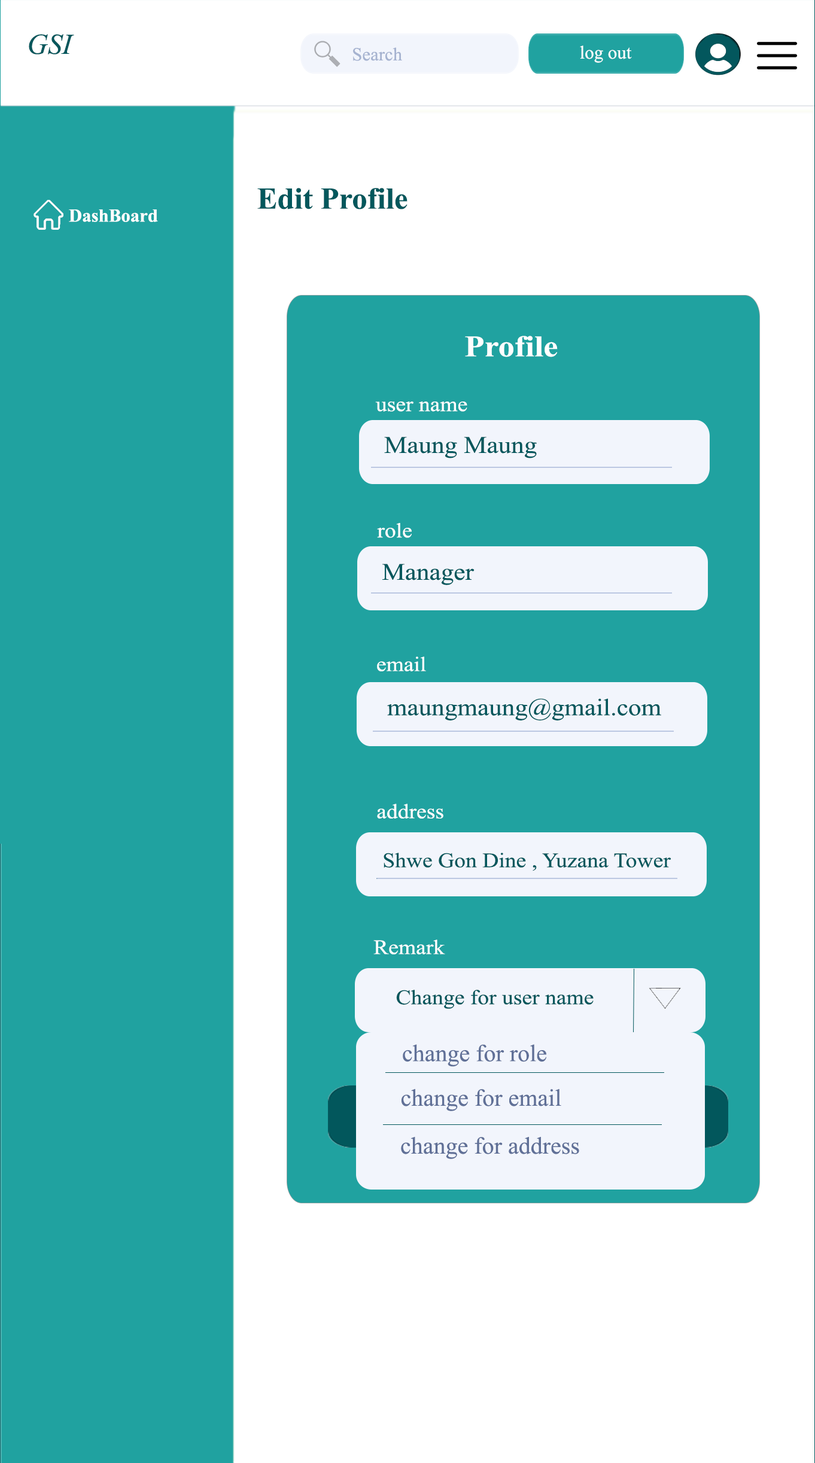
<style>
.page{position:relative;width:815px;height:1463px;background:#20a2a0}
.page>*{position:absolute;margin:0}
.t1{font:28.7px "TimesNewRomanPS-ItalicMT";color:#02575c}
.t2{font:18.5px "TimesNewRomanPSMT";color:#a6b3d0}
.t3{font:18.5px "TimesNewRomanPSMT";color:#ffffff}
.t4{font:30.4px "TimesNewRomanPS-BoldMT";color:#02575c}
.t5{font:18.5px "TimesNewRomanPS-BoldMT";color:#ffffff}
.t6{font:29.9px "TimesNewRomanPS-BoldMT";color:#ffffff;scale:1.09 1}
.t7{font:20.7px "TimesNewRomanPSMT";color:#ffffff;scale:1.09 1}
.t8{font:23.7px "TimesNewRomanPSMT";color:#02575c;scale:1.09 1}
.t9{font:20.7px "TimesNewRomanPSMT";color:#02575c;scale:1.09 1}
.t10{font:23.9px "TimesNewRomanPSMT";color:#607097}
</style>
<div class="page">
<p class="t1" style="left:29px;top:34px;width:45px;height:20px">GSI</p>
<p class="t2" style="left:353px;top:47px;width:49px;height:14px">Search</p>
<p class="t3" style="left:580px;top:45px;width:52px;height:18px">log out</p>
<p class="t4" style="left:257px;top:188px;width:151px;height:21px">Edit Profile</p>
<p class="t5" style="left:69px;top:209px;width:89px;height:13px">DashBoard</p>
<p class="t6" style="left:465px;top:336px;width:93px;height:21px">Profile</p>
<p class="t7" style="left:375px;top:402px;width:92px;height:10px">user name</p>
<p class="t8" style="left:384px;top:437px;width:153px;height:21px">Maung Maung</p>
<p class="t7" style="left:377px;top:523px;width:35px;height:15px">role</p>
<p class="t8" style="left:382px;top:564px;width:93px;height:21px">Manager</p>
<p class="t7" style="left:377px;top:656px;width:49px;height:15px">email</p>
<p class="t8" style="left:387px;top:698px;width:274px;height:22px">maungmaung@gmail.com</p>
<p class="t7" style="left:377px;top:804px;width:66px;height:15px">address</p>
<p class="t9" style="left:384px;top:853px;width:287px;height:18px">Shwe Gon Dine , Yuzana Tower</p>
<p class="t7" style="left:373px;top:939px;width:72px;height:15px">Remark</p>
<p class="t9" style="left:396px;top:990px;width:198px;height:19px">Change for user name</p>
<p class="t10" style="left:403px;top:1044px;width:143px;height:23px">change for role</p>
<p class="t10" style="left:401px;top:1089px;width:160px;height:22px">change for email</p>
<p class="t10" style="left:401px;top:1137px;width:178px;height:22px">change for address</p>
</div>
